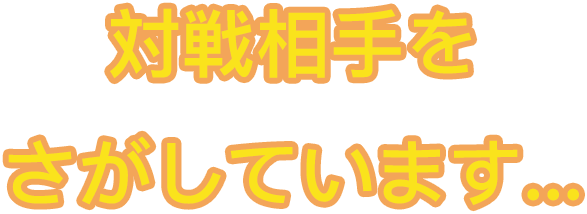
<style>
.page{position:relative;width:587px;height:214px;background:#ffffff}
.page>*{position:absolute;margin:0}
.t1{font:74.4px "PingFangHK-Semibold";color:#fae31c}
</style>
<div class="page">
<p class="t1" style="left:8px;top:8px;width:571px;height:198px;text-align:center">対戦相手を<br>さがしています...</p>
</div>
